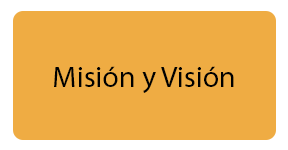
<style>
.page{position:relative;width:288px;height:150px;background:#efac43}
.page>*{position:absolute;margin:0}
.t1{font:29.8px "MyriadPro-Regular";color:#000000}
</style>
<div class="page">
<p class="t1" style="left:54px;top:66px;width:180px;height:27px">Misión y Visión</p>
</div>
